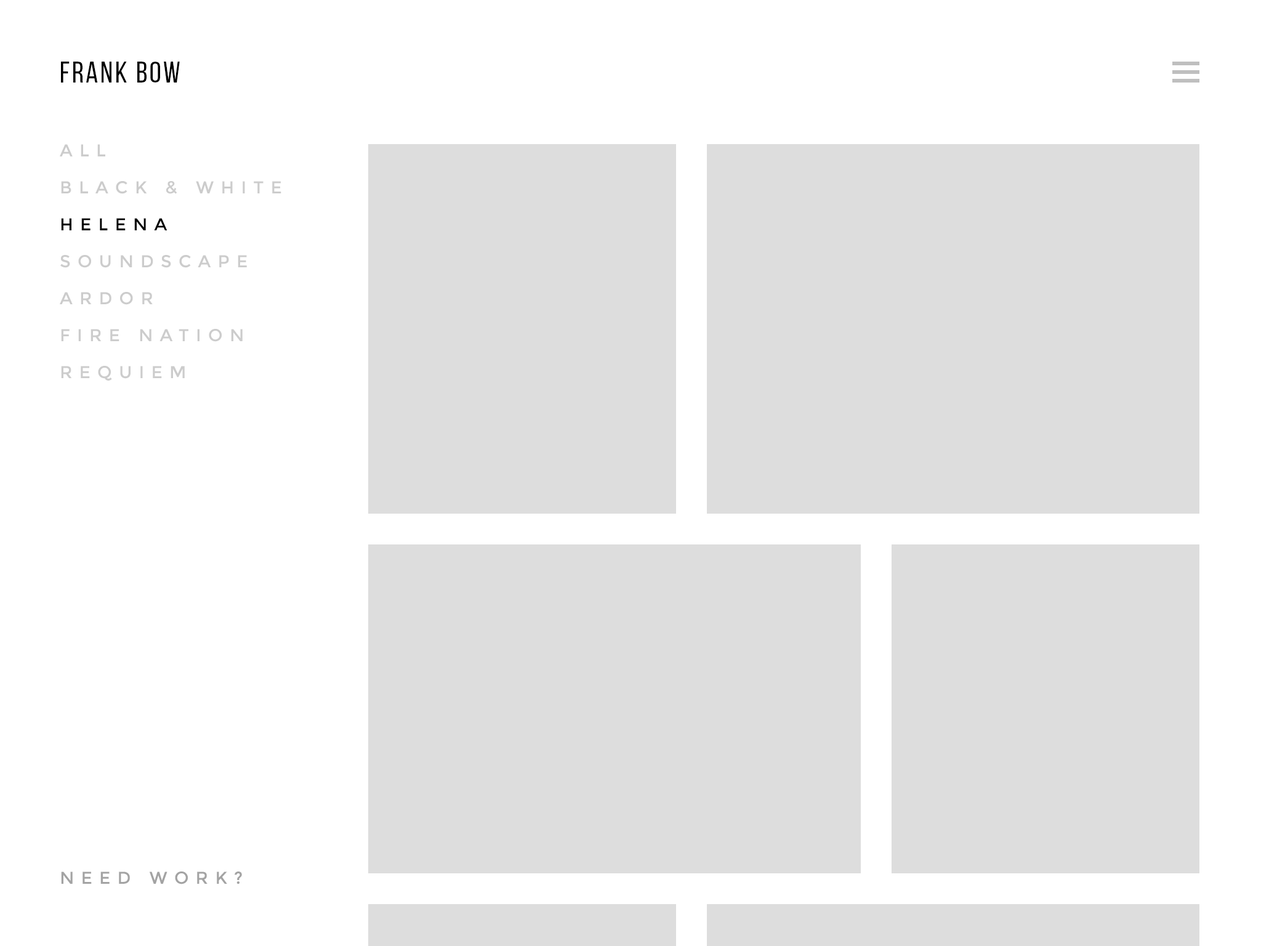
<style>
.page{position:relative;width:1261px;height:946px;background:#ffffff}
.page>*{position:absolute;margin:0}
.t1{font:29.6px "BebasNeueRegular";letter-spacing:0.075em;color:#000000;text-transform:uppercase}
.t2{font:17.2px/36.9px "Montserrat-Regular";letter-spacing:0.4em;color:#cccccc;text-transform:uppercase}
.t3{font:17.2px/36.9px "Montserrat-Regular";letter-spacing:0.4em;color:#000000;text-transform:uppercase}
.t4{font:17.2px "Montserrat-Regular";letter-spacing:0.4em;color:#a3a3a3;text-transform:uppercase}
</style>
<div class="page">
<p class="t1" style="left:61px;top:62px;width:119px;height:21px">FRANK BOW</p>
<p class="t2" style="left:60px;top:144px;width:221px;height:236px">ALL<br>BLACK &amp; WHITE<br><span class="t3">HELENA</span><br>soundscape<br>ARDOR<br>FIRE NATION<br>REQUIEM</p>
<p class="t4" style="left:61px;top:871px;width:181px;height:13px">NEED WORK?</p>
</div>
